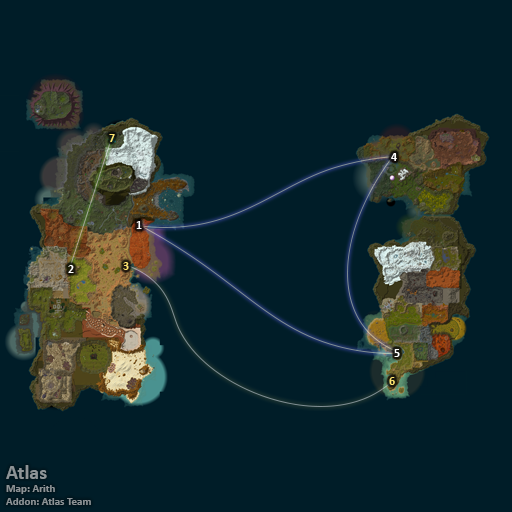
<style>
.page{position:relative;width:512px;height:512px;background:#001d28}
.page>*{position:absolute;margin:0}
.t1{font:12px "Calibri-Bold";color:#fee570}
.t2{font:12px "Calibri-Bold";color:#ffffff}
.t3{font:11px "Calibri-Bold";color:#8d9396}
.t4{font:20px "Calibri-Bold";color:#8d9396}
</style>
<div class="page">
<p class="t1" style="left:109px;top:134px;width:6px;height:8px">7</p>
<p class="t2" style="left:391px;top:153px;width:6px;height:8px">4</p>
<p class="t2" style="left:136px;top:221px;width:6px;height:8px">1</p>
<p class="t2" style="left:68px;top:265px;width:6px;height:8px">2</p>
<p class="t1" style="left:123px;top:262px;width:6px;height:8px">3</p>
<p class="t2" style="left:394px;top:349px;width:6px;height:8px">5</p>
<p class="t1" style="left:389px;top:377px;width:6px;height:8px">6</p>
<p class="t3" style="left:6px;top:465px;width:85px;height:40px"><span class="t4">Atlas<br></span>Map: Arith<br>Addon: Atlas Team</p>
</div>
